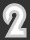
<style>
.page{position:relative;width:30px;height:40px;background:#333333}
.page>*{position:absolute;margin:0}
.t1{font:50px "Bauhaus93";letter-spacing:0.2em}
</style>
<div class="page">
<p class="t1" style="left:2px;top:3px;width:25px;height:35px">2</p>
</div>
